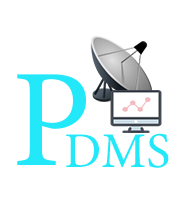
<style>
.page{position:relative;width:194px;height:214px;background:#ffffff}
.page>*{position:absolute;margin:0}
.t1{font:139.4px "MinionVariableConcept-Roman";color:#22e8fa}
.t2{font:50px "MinionVariableConcept-Roman";color:#22e8fa}
</style>
<div class="page">
<p class="t1" style="left:17px;top:74px;width:69px;height:91px">P</p>
<p class="t2" style="left:66px;top:133px;width:103px;height:35px">DMS</p>
</div>
